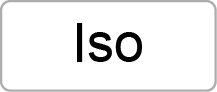
<style>
.page{position:relative;width:217px;height:92px;background:#ffffff}
.page>*{position:absolute;margin:0}
.t1{font:54.2px "ArialMT";color:#000000}
</style>
<div class="page">
<p class="t1" style="left:77px;top:23px;width:65px;height:39px">Iso</p>
</div>
